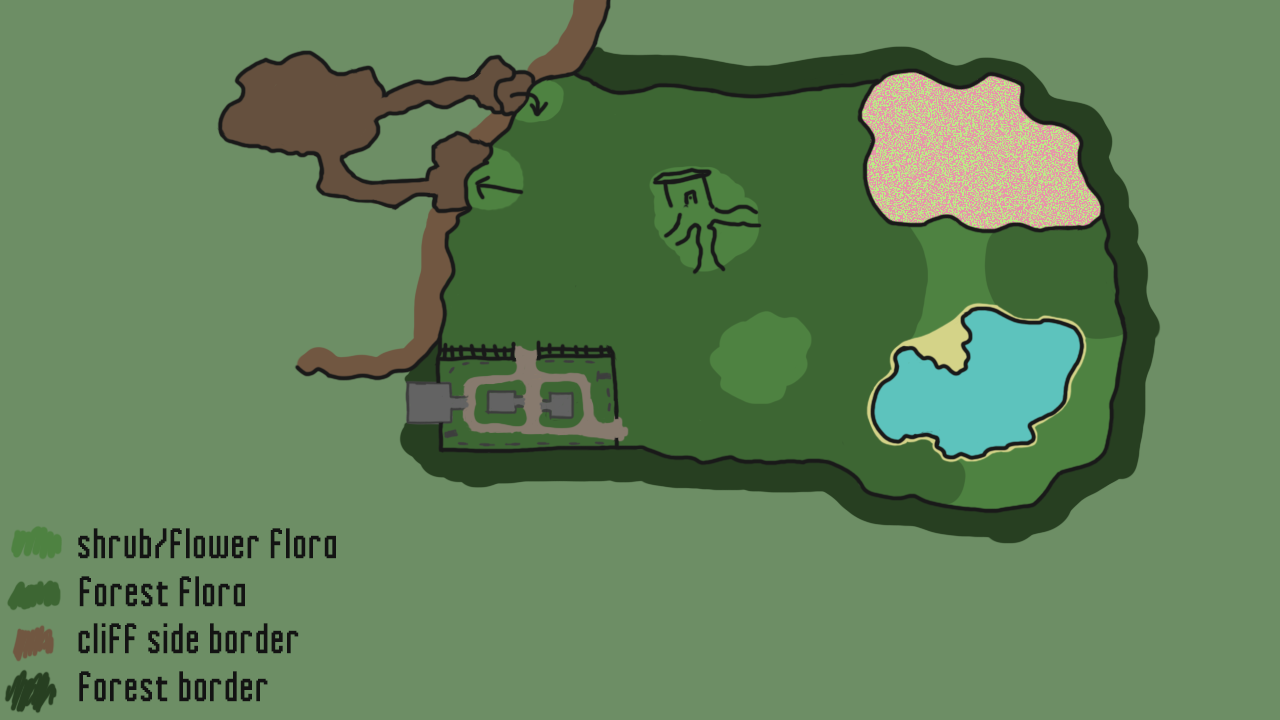
<style>
.page{position:relative;width:1280px;height:720px;background:#6d8e65}
.page>*{position:absolute;margin:0}
.t1{font:30px "Inky-Thin-Pixels";letter-spacing:0.075em;color:#131313}
</style>
<div class="page">
<p class="t1" style="left:78px;top:528px;width:258px;height:31px">shrub/flower flora</p>
<p class="t1" style="left:79px;top:576px;width:166px;height:31px">forest flora</p>
<p class="t1" style="left:78px;top:623px;width:221px;height:31px">cliff side border</p>
<p class="t1" style="left:79px;top:671px;width:189px;height:31px">forest border</p>
</div>
